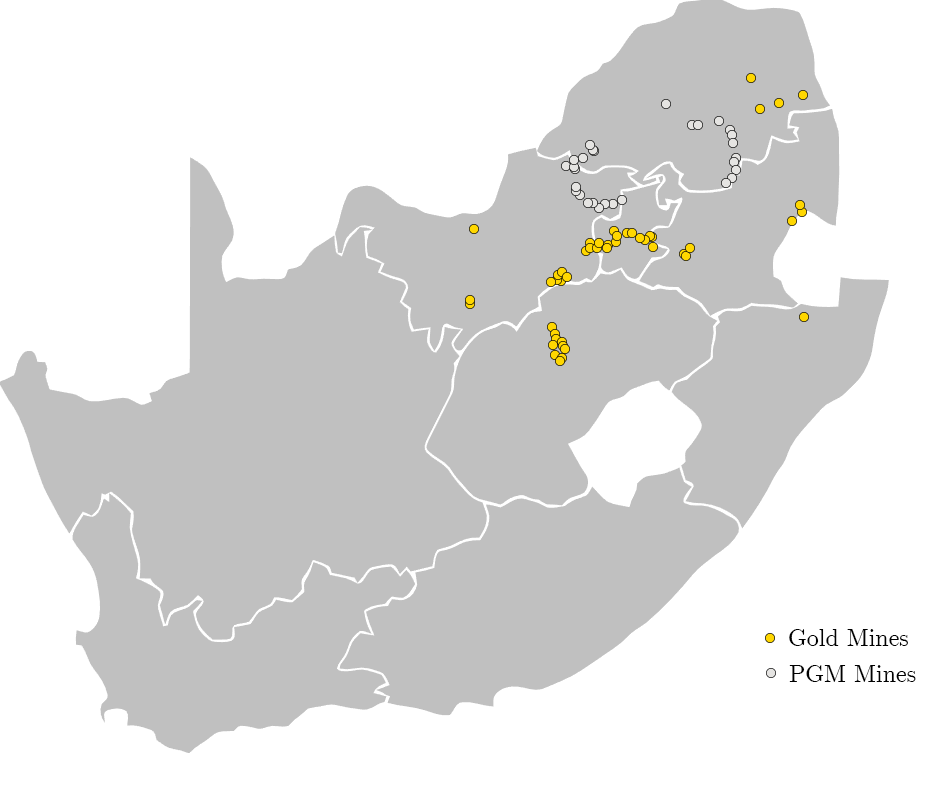
<style>
.page{position:relative;width:950px;height:790px;background:#ffffff}
.page>*{position:absolute;margin:0}
.t1{font:24px "CMUSerif-Roman";color:#000000}
</style>
<div class="page">
<p class="t1" style="left:789px;top:629px;width:119px;height:17px">Gold Mines</p>
<p class="t1" style="left:789px;top:665px;width:127px;height:17px">PGM Mines</p>
</div>
